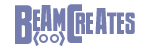
<style>
.page{position:relative;width:149px;height:52px;background:#ffffff}
.page>*{position:absolute;margin:0}
.t1{font:50px "NewsflashBB";color:#757daf}
.t2{font:33.3px "NewsflashBB";color:#757daf}
.t3{font:29.2px "NewsflashBB";color:#757daf}
.t4{font:20.8px "PalookaBB";color:#757daf}
</style>
<div class="page">
<p class="t1" style="left:15px;top:5px;width:17px;height:39px">B</p>
<p class="t2" style="left:40px;top:5px;width:12px;height:26px">A</p>
<p class="t1" style="left:67px;top:4px;width:15px;height:39px">C</p>
<p class="t3" style="left:33px;top:9px;width:7px;height:22px">e</p>
<p class="t3" style="left:53px;top:8px;width:13px;height:23px">M</p>
<p class="t3" style="left:75px;top:12px;width:60px;height:22px">re   tes</p>
<p class="t2" style="left:95px;top:8px;width:12px;height:26px">A</p>
<p class="t4" style="left:33px;top:31px;width:32px;height:15px">&lt;    &gt;</p>
</div>
